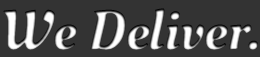
<style>
.page{position:relative;width:260px;height:57px;background:#333333}
.page>*{position:absolute;margin:0}
.t1{font:55.2px "OleoScript-Regular";scale:1.08 1}
</style>
<div class="page">
<p class="t1" style="left:3px;top:8px;width:255px;height:42px">We Deliver.</p>
</div>
